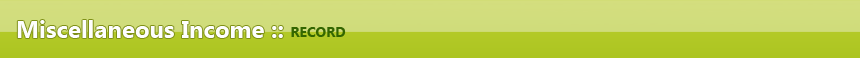
<style>
.page{position:relative;width:860px;height:58px}
.page>*{position:absolute;margin:0}
.t1{font:24px "SegoeUI-Bold";color:#fefefe}
.t2{font:14px "SegoeUI-Bold";color:#336600}
</style>
<div class="page">
<p class="t1" style="left:17px;top:20px;width:266px;height:18px">Miscellaneous Income ::</p>
<p class="t2" style="left:291px;top:27px;width:55px;height:10px">RECORD</p>
</div>
